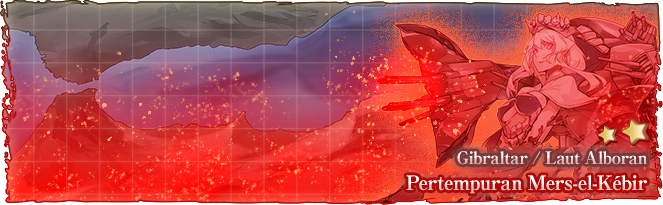
<style>
.page{position:relative;width:663px;height:205px}
.page>*{position:absolute;margin:0}
.t1{font:17px "RyuminPro-ExBold";letter-spacing:-0.04em}
.t2{font:20px "RyuminPro-ExBold";letter-spacing:-0.04em}
</style>
<div class="page">
<p class="t1" style="left:457px;top:151px;width:190px;height:14px">Gibraltar / Laut Alboran</p>
<p class="t2" style="left:406px;top:175px;width:241px;height:19px">Pertempuran Mers-el-Kébir</p>
</div>
